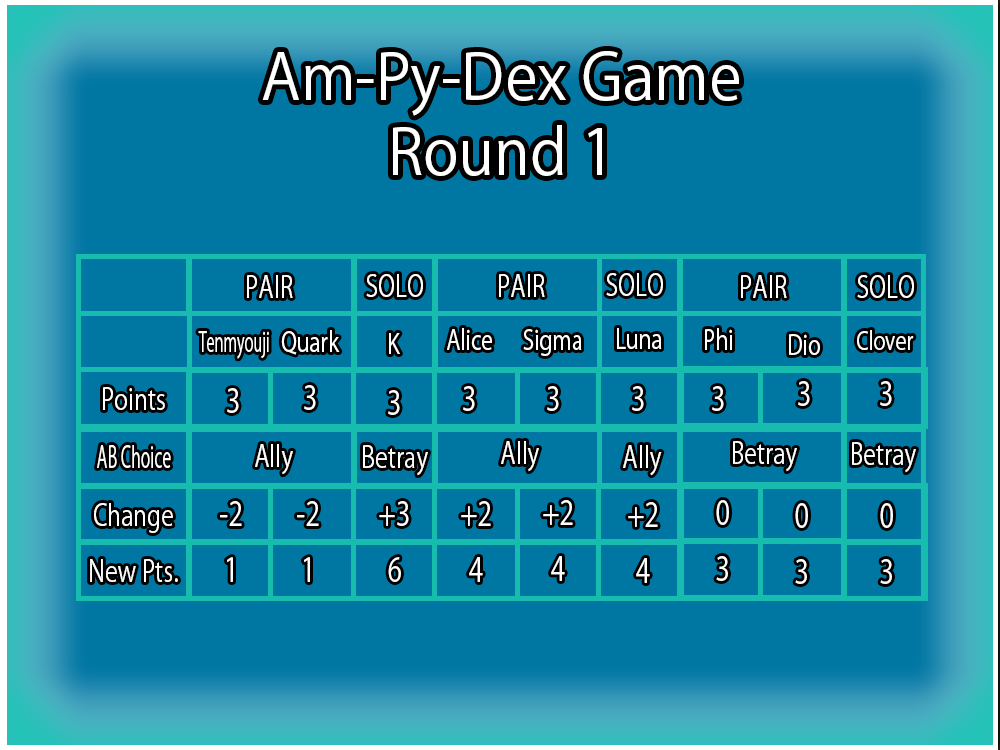
<style>
.page{position:relative;width:1000px;height:750px;background:#0076a3}
.page>*{position:absolute;margin:0}
.t1{font:62.5px "KozGoPr6N-Regular";color:#ffffff;scale:0.97 1}
.t2{font:29.2px "KozGoPr6N-Regular";color:#ffffff;scale:0.8 1}
.t3{font:26.9px "KozGoPr6N-Regular";color:#ffffff;scale:0.8 1}
.t4{font:26.9px "KozGoPr6N-Regular";color:#ffffff;scale:0.56 1}
.t5{font:24.8px "KozGoPr6N-Regular";color:#ffffff;scale:0.8 1}
.t6{font:32.8px "KozGoPr6N-Regular";color:#ffffff;scale:0.8 1}
.t7{font:29.2px "KozGoPr6N-Regular";color:#ffffff;scale:0.56 1}
.t8{font:32.8px "KozGoPr6N-Regular";color:#fcfcfc;scale:0.8 1}
</style>
<div class="page">
<p class="t1" style="left:262px;top:51px;width:477px;height:125px;text-align:center">Am-Py-Dex Game<br>Round 1</p>
<p class="t2" style="left:247px;top:275px;width:46px;height:23px">PAIR</p>
<p class="t2" style="left:366px;top:274px;width:57px;height:23px">SOLO</p>
<p class="t2" style="left:499px;top:274px;width:46px;height:23px">PAIR</p>
<p class="t2" style="left:606px;top:273px;width:57px;height:23px">SOLO</p>
<p class="t2" style="left:741px;top:275px;width:46px;height:23px">PAIR</p>
<p class="t2" style="left:857px;top:275px;width:57px;height:23px">SOLO</p>
<p class="t3" style="left:447px;top:328px;width:45px;height:22px">Alice</p>
<p class="t3" style="left:523px;top:329px;width:59px;height:27px">Sigma</p>
<p class="t3" style="left:617px;top:328px;width:45px;height:21px">Luna</p>
<p class="t3" style="left:705px;top:328px;width:27px;height:22px">Phi</p>
<p class="t4" style="left:198px;top:331px;width:71px;height:28px">Tenmyouji</p>
<p class="t3" style="left:281px;top:330px;width:59px;height:25px">Quark</p>
<p class="t3" style="left:389px;top:333px;width:11px;height:21px">K</p>
<p class="t3" style="left:789px;top:334px;width:31px;height:21px">Dio</p>
<p class="t5" style="left:857px;top:330px;width:57px;height:20px">Clover</p>
<p class="t2" style="left:103px;top:387px;width:62px;height:23px">Points</p>
<p class="t6" style="left:227px;top:388px;width:12px;height:25px">3</p>
<p class="t6" style="left:304px;top:385px;width:12px;height:25px">3</p>
<p class="t6" style="left:388px;top:390px;width:12px;height:25px">3</p>
<p class="t6" style="left:463px;top:386px;width:12px;height:25px">3</p>
<p class="t6" style="left:547px;top:386px;width:12px;height:25px">3</p>
<p class="t6" style="left:632px;top:386px;width:12px;height:25px">3</p>
<p class="t6" style="left:712px;top:386px;width:12px;height:25px">3</p>
<p class="t6" style="left:798px;top:381px;width:12px;height:25px">3</p>
<p class="t6" style="left:880px;top:381px;width:12px;height:25px">3</p>
<p class="t7" style="left:97px;top:445px;width:74px;height:23px">AB Choice</p>
<p class="t2" style="left:255px;top:444px;width:38px;height:31px">Ally</p>
<p class="t2" style="left:363px;top:445px;width:65px;height:31px">Betray</p>
<p class="t2" style="left:501px;top:441px;width:38px;height:31px">Ally</p>
<p class="t2" style="left:623px;top:445px;width:39px;height:31px">Ally</p>
<p class="t2" style="left:733px;top:441px;width:64px;height:31px">Betray</p>
<p class="t2" style="left:852px;top:442px;width:64px;height:31px">Betray</p>
<p class="t2" style="left:94px;top:503px;width:79px;height:30px">Change</p>
<p class="t6" style="left:220px;top:501px;width:22px;height:25px">-2</p>
<p class="t6" style="left:297px;top:501px;width:22px;height:25px">-2</p>
<p class="t6" style="left:379px;top:501px;width:30px;height:25px">+3</p>
<p class="t6" style="left:461px;top:501px;width:30px;height:25px">+2</p>
<p class="t6" style="left:543px;top:500px;width:30px;height:25px">+2</p>
<p class="t6" style="left:628px;top:502px;width:30px;height:25px">+2</p>
<p class="t8" style="left:716px;top:500px;width:13px;height:25px">0</p>
<p class="t8" style="left:795px;top:503px;width:13px;height:25px">0</p>
<p class="t8" style="left:880px;top:503px;width:13px;height:25px">0</p>
<p class="t6" style="left:227px;top:557px;width:6px;height:25px">1</p>
<p class="t6" style="left:304px;top:557px;width:6px;height:25px">1</p>
<p class="t6" style="left:388px;top:557px;width:13px;height:25px">6</p>
<p class="t6" style="left:469px;top:557px;width:14px;height:25px">4</p>
<p class="t6" style="left:551px;top:556px;width:14px;height:25px">4</p>
<p class="t6" style="left:636px;top:558px;width:14px;height:25px">4</p>
<p class="t8" style="left:716px;top:556px;width:12px;height:25px">3</p>
<p class="t2" style="left:90px;top:559px;width:88px;height:23px">New Pts.</p>
<p class="t8" style="left:795px;top:559px;width:12px;height:25px">3</p>
<p class="t8" style="left:880px;top:559px;width:12px;height:25px">3</p>
</div>
